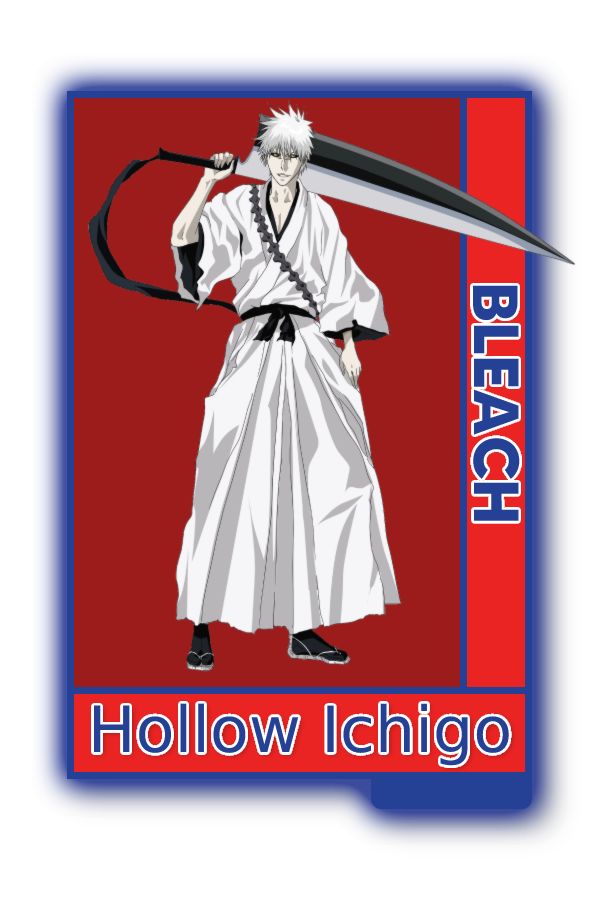
<style>
.page{position:relative;width:600px;height:900px;background:#9c1c1b}
.page>*{position:absolute;margin:0}
.t1{font:63.6px "MADETOMMY-Bold";color:#254195}
.t2{font:63.6px "CoolveticaRg-Regular";color:#254195}
</style>
<div class="page">
<p class="t1" style="left:473px;top:285px;width:47px;height:236px;rotate:90deg">BLEACH</p>
<p class="t2" style="left:94px;top:703px;width:415px;height:63px">Hollow Ichigo</p>
</div>
